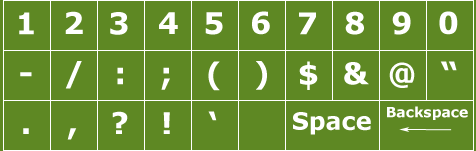
<style>
.page{position:relative;width:476px;height:151px;background:#5e8823}
.page>*{position:absolute;margin:0}
.t1{font:30px "Verdana-Bold";color:#ffffff}
.t2{font:24px "Verdana-Bold";color:#ffffff}
.t3{font:14px "Verdana-Bold";color:#ffffff}
</style>
<div class="page">
<p class="t1" style="left:19px;top:12px;width:15px;height:23px">1</p>
<p class="t1" style="left:65px;top:11px;width:18px;height:23px">2</p>
<p class="t1" style="left:110px;top:12px;width:18px;height:23px">3</p>
<p class="t1" style="left:159px;top:12px;width:19px;height:22px">4</p>
<p class="t1" style="left:205px;top:12px;width:18px;height:23px">5</p>
<p class="t1" style="left:252px;top:11px;width:18px;height:24px">6</p>
<p class="t1" style="left:299px;top:12px;width:17px;height:23px">7</p>
<p class="t1" style="left:345px;top:11px;width:19px;height:24px">8</p>
<p class="t1" style="left:392px;top:11px;width:19px;height:24px">9</p>
<p class="t1" style="left:439px;top:11px;width:19px;height:24px">0</p>
<p class="t1" style="left:65px;top:61px;width:17px;height:28px">/</p>
<p class="t1" style="left:208px;top:61px;width:12px;height:30px">(</p>
<p class="t1" style="left:256px;top:61px;width:11px;height:29px">)</p>
<p class="t1" style="left:299px;top:61px;width:19px;height:29px">$</p>
<p class="t1" style="left:344px;top:62px;width:25px;height:23px">&amp;</p>
<p class="t1" style="left:389px;top:62px;width:26px;height:26px">@</p>
<p class="t1" style="left:440px;top:61px;width:17px;height:10px">“</p>
<p class="t1" style="left:20px;top:72px;width:12px;height:5px">-</p>
<p class="t1" style="left:117px;top:67px;width:6px;height:18px">:</p>
<p class="t1" style="left:161px;top:67px;width:9px;height:23px">;</p>
<p class="t1" style="left:112px;top:111px;width:16px;height:23px">?</p>
<p class="t1" style="left:163px;top:112px;width:7px;height:22px">!</p>
<p class="t1" style="left:208px;top:111px;width:9px;height:10px">‘</p>
<p class="t2" style="left:293px;top:112px;width:78px;height:23px">Space</p>
<p class="t3" style="left:387px;top:106px;width:81px;height:14px">Backspace</p>
<p class="t1" style="left:23px;top:128px;width:6px;height:6px">.</p>
<p class="t1" style="left:67px;top:128px;width:10px;height:12px">,</p>
</div>
